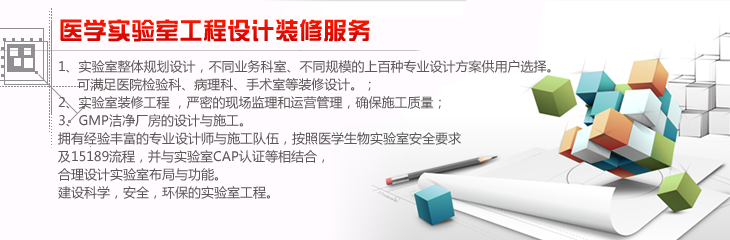
<style>
.page{position:relative;width:730px;height:240px;background:#fffbff}
.page>*{position:absolute;margin:0}
.t1{font:24px "DFZongYi-Bd-80-Win-GB";color:#e60d00}
.t2{font:13px/18px "MicrosoftYaHei";color:#5b5858}
</style>
<div class="page">
<p class="t1" style="left:60px;top:19px;width:310px;height:23px">医学实验室工程设计装修服务</p>
<p class="t2" style="left:58px;top:60px;width:493px;height:139px">1、实验室整体规划设计，不同业务科室、不同规模的上百种专业设计方案供用户选择。<br>     可满足医院检验科、病理科、手术室等装修设计。；<br>2、实验室装修工程 ，严密的现场监理和运营管理，确保施工质量；<br>3、GMP洁净厂房的设计与施工。<br>拥有经验丰富的专业设计师与施工队伍，按照医学生物实验室安全要求<br>及15189流程，并与实验室CAP认证等相结合，<br>合理设计实验室布局与功能。<br>建设科学，安全，环保的实验室工程。</p>
</div>
